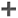
<style>
.page{position:relative;width:18px;height:18px;background:#ffffff}
.page>*{position:absolute;margin:0}
.t1{font:22px "Verdana-Bold";color:#555555}
</style>
<div class="page">
<p class="t1" style="left:1px;top:1px;width:15px;height:16px">+</p>
</div>
